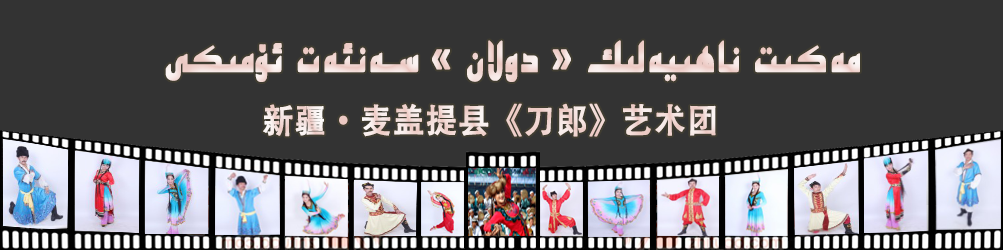
<style>
.page{position:relative;width:1003px;height:250px;background:#333333}
.page>*{position:absolute;margin:0}
.t1{font:48px "UKIJKufiUz";letter-spacing:0.02em;color:#f2dbd7;font-weight:bold;scale:0.75 1}
.t2{font:33.8px "AdobeHeitiStd-Regular";letter-spacing:0.02em;color:#f2dbd7;font-weight:bold;scale:0.92 1}
</style>
<div class="page">
<p class="t1" style="left:165px;top:40px;width:695px;height:42px">مەكىت ناھىيەلىك « دولان » سەنئەت ئۆمىكى</p>
<p class="t2" style="left:263px;top:103px;width:453px;height:34px">新疆·麦盖提县《刀郎》艺术团</p>
</div>
